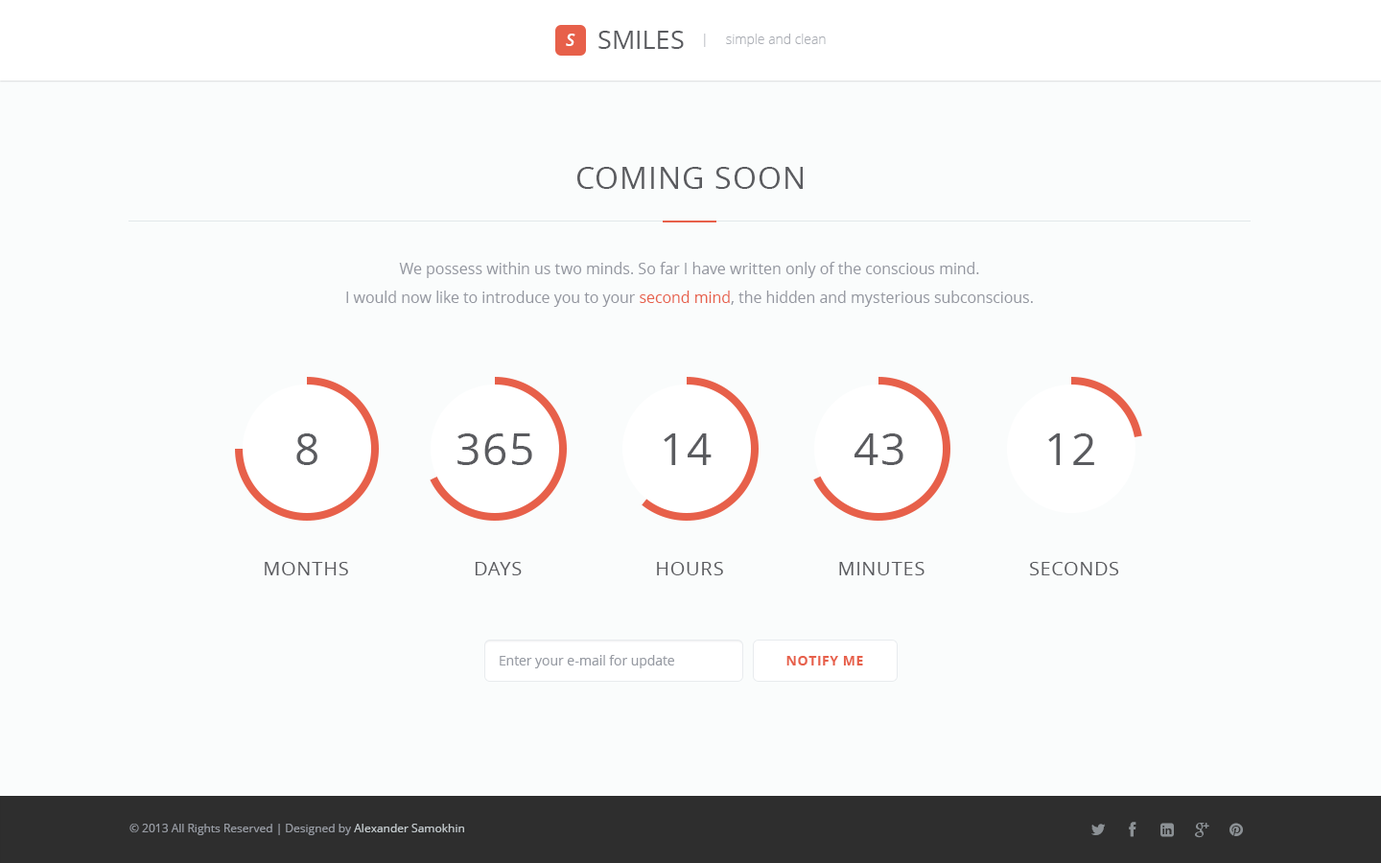
<style>
.page{position:relative;width:1381px;height:863px;background:#fafcfc}
.page>*{position:absolute;margin:0}
.t1{font:17.3px "OpenSans-SemiboldItalic";color:#ffffff}
.t2{font:25.9px "OpenSans";color:#5a5b5f}
.t3{font:13.4px "OpenSans-Light";color:#abaeb5}
.t4{font:30.7px "OpenSans";letter-spacing:0.04em;color:#5a5b5f}
.t5{font:15.3px/28.8px "OpenSans";color:#93969f}
.t6{font:15.3px/28.8px "OpenSans";color:#e7604a}
.t7{font:44.1px "OpenSans";letter-spacing:0.04em;color:#5a5b5f}
.t8{font:19.2px "OpenSans";letter-spacing:0.04em;color:#5a5b5f;text-transform:uppercase}
.t9{font:13.4px "OpenSans";color:#979ba3}
.t10{font:13.4px "OpenSans-Bold";letter-spacing:0.04em;color:#e7604a}
.t11{font:11.5px "OpenSans";color:#979ba3}
.t12{font:11.5px "OpenSans";color:#c2c9cc}
</style>
<div class="page">
<p class="t1" style="left:566px;top:34px;width:10px;height:12px">S</p>
<p class="t2" style="left:599px;top:31px;width:85px;height:18px">SMILES</p>
<p class="t3" style="left:704px;top:34px;width:122px;height:13px">|     simple and clean</p>
<p class="t4" style="left:577px;top:167px;width:226px;height:22px">COMING SOON</p>
<p class="t5" style="left:346px;top:262px;width:687px;height:45px;text-align:center">We possess within us two minds. So far I have written only of the conscious mind.<br>I would now like to introduce you to your <span class="t6">second mind</span>, the hidden and mysterious subconscious.</p>
<p class="t7" style="left:296px;top:434px;width:21px;height:31px">8</p>
<p class="t7" style="left:458px;top:434px;width:74px;height:31px">365</p>
<p class="t7" style="left:664px;top:434px;width:48px;height:31px">14</p>
<p class="t7" style="left:855px;top:434px;width:49px;height:31px">43</p>
<p class="t7" style="left:1048px;top:434px;width:46px;height:31px">12</p>
<p class="t8" style="left:265px;top:562px;width:83px;height:14px">MONTHS</p>
<p class="t8" style="left:475px;top:562px;width:47px;height:14px">DAYS</p>
<p class="t8" style="left:657px;top:562px;width:66px;height:14px">HOURS</p>
<p class="t8" style="left:839px;top:562px;width:86px;height:14px">MINUTES</p>
<p class="t8" style="left:1029px;top:562px;width:90px;height:14px">SECONDS</p>
<p class="t9" style="left:500px;top:655px;width:174px;height:14px">Enter your e-mail for update</p>
<p class="t10" style="left:787px;top:656px;width:76px;height:10px">NOTIFY ME</p>
<p class="t11" style="left:129px;top:824px;width:335px;height:11px">© 2013 All Rights Reserved | Designed by <span class="t12">Alexander Samokhin</span></p>
</div>
